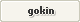
<style>
.page{position:relative;width:80px;height:22px;background:#f6f4ed}
.page>*{position:absolute;margin:0}
.t1{font:9px "Verdana-Bold";color:#383838}
</style>
<div class="page">
<p class="t1" style="left:28px;top:6px;width:26px;height:10px">gokin</p>
</div>
